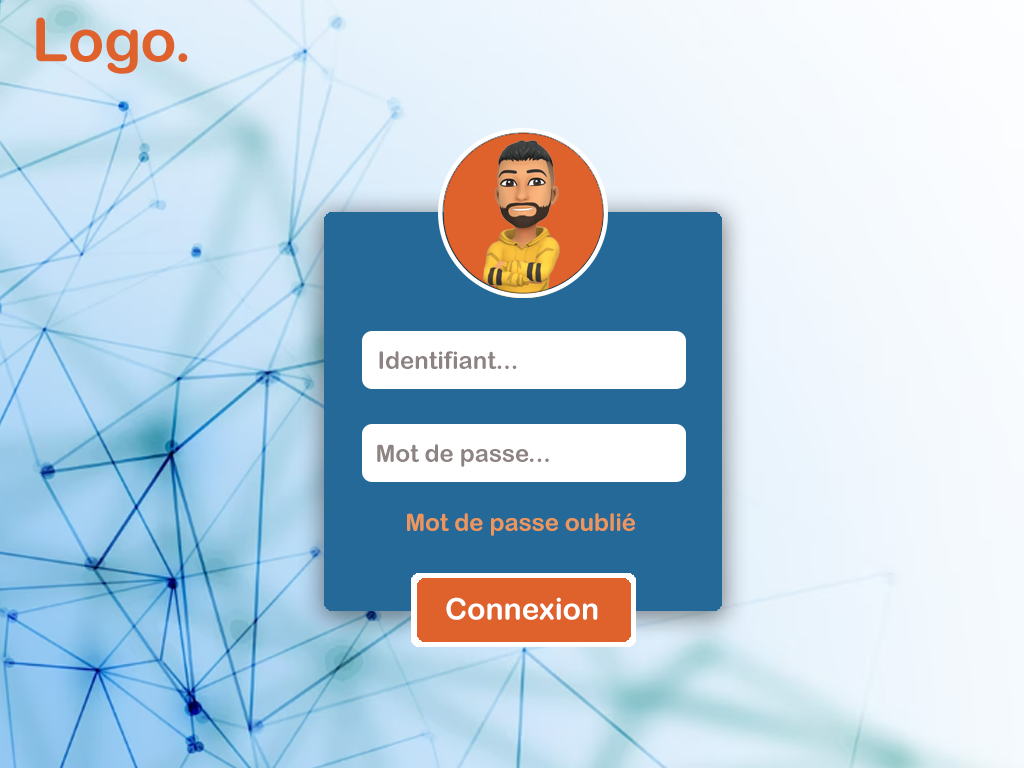
<style>
.page{position:relative;width:1024px;height:768px}
.page>*{position:absolute;margin:0}
.t1{font:60px "ArialRoundedMTBold";color:#df622c}
.t2{font:24px "ArialRoundedMTBold";color:#8e8383}
.t3{font:24px "ArialRoundedMTBold";color:#ed965c}
.t4{font:30px "ArialRoundedMTBold";color:#ffffff}
</style>
<div class="page">
<p class="t1" style="left:36px;top:17px;width:152px;height:57px">Logo.</p>
<p class="t2" style="left:379px;top:351px;width:138px;height:18px">Identifiant...</p>
<p class="t2" style="left:377px;top:444px;width:172px;height:23px">Mot de passe...</p>
<p class="t3" style="left:407px;top:513px;width:228px;height:23px">Mot de passe oublié</p>
<p class="t4" style="left:446px;top:597px;width:152px;height:23px">Connexion</p>
</div>
